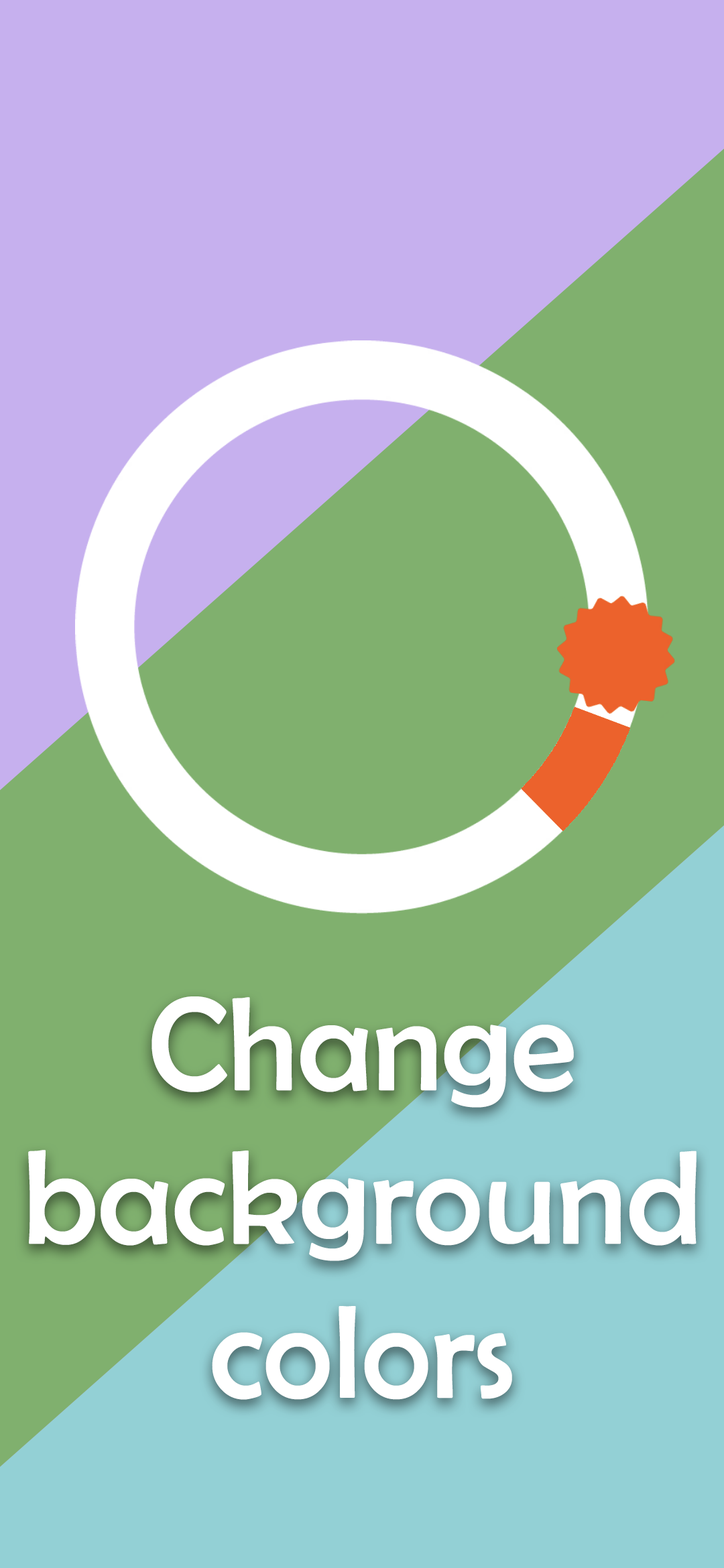
<style>
.page{position:relative;width:724px;height:1568px;background:#80b06e}
.page>*{position:absolute;margin:0}
.t1{font:134px/153.6px "BerlinSansFB-Reg";color:#ffffff}
</style>
<div class="page">
<p class="t1" style="left:28px;top:996px;width:668px;height:404px;text-align:center">Change<br>background<br>colors</p>
</div>
